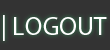
<style>
.page{position:relative;width:110px;height:50px;background:#333333}
.page>*{position:absolute;margin:0}
.t1{font:26px "MyriadPro-Regular";color:#ffffff;text-transform:uppercase}
</style>
<div class="page">
<p class="t1" style="left:3px;top:15px;width:104px;height:26px">| LOGout</p>
</div>
